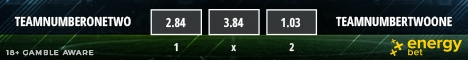
<style>
.page{position:relative;width:468px;height:60px}
.page>*{position:absolute;margin:0}
.t1{font:12.8px "OpenSansCondensed-Bold";color:#ffffff}
.t2{font:12.6px "OpenSansCondensed-Bold";color:#ffffff;scale:0.96 1}
.t3{font:12.6px "OpenSansCondensed-Bold";color:#ffffff;scale:0.94 1}
.t4{font:12.6px "OpenSansCondensed-Bold";color:#ffffff;scale:0.95 1}
.t5{font:10.7px "OpenSansCondensed-Bold";color:#ffffff}
.t6{font:10.7px "OpenSansCondensed-Bold";color:#eff0ef}
</style>
<div class="page">
<p class="t1" style="left:14px;top:16px;width:117px;height:11px">TEAMNUMBERONETWO</p>
<p class="t2" style="left:166px;top:17px;width:20px;height:11px">2.84</p>
<p class="t3" style="left:224px;top:17px;width:20px;height:11px">3.84</p>
<p class="t4" style="left:281px;top:17px;width:20px;height:11px">1.03</p>
<p class="t1" style="left:336px;top:16px;width:116px;height:11px">TEAMNUMBERTWOONE</p>
<p class="t5" style="left:174px;top:43px;width:4px;height:9px;opacity:0.9">1</p>
<p class="t5" style="left:231px;top:45px;width:5px;height:7px;opacity:0.9">x</p>
<p class="t6" style="left:289px;top:43px;width:5px;height:9px">2</p>
</div>
